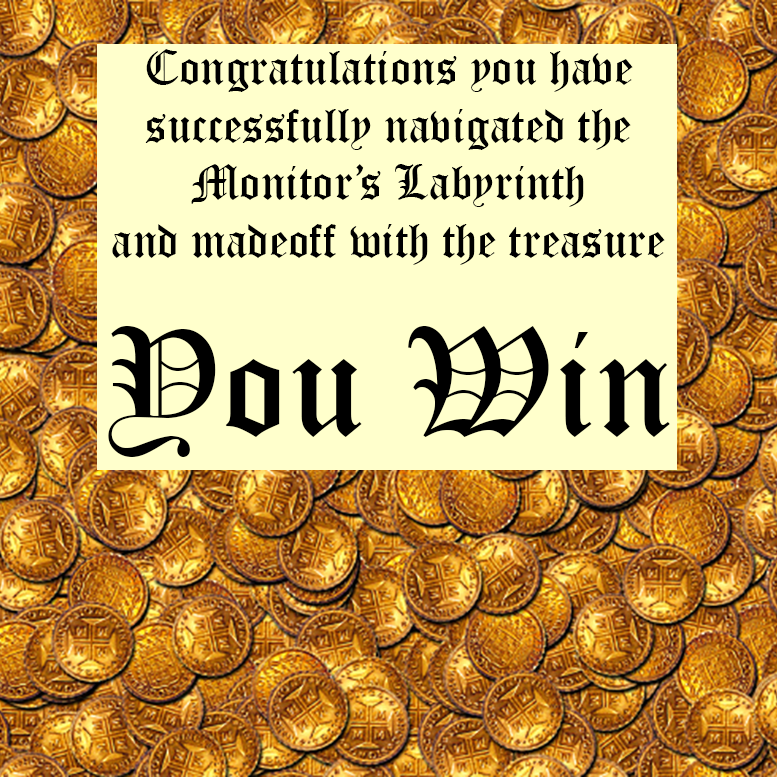
<style>
.page{position:relative;width:777px;height:777px;background:#ffffcc}
.page>*{position:absolute;margin:0}
.t1{font:48px "OldEnglishTextMT";color:#000000}
.t2{font:150px "OldEnglishTextMT";color:#000000}
</style>
<div class="page">
<p class="t1" style="left:112px;top:49px;width:553px;height:216px;text-align:center">Congratulations you have<br>successfully navigated the<br>Monitor’s Labyrinth<br>and madeoff with the treasure</p>
<p class="t2" style="left:108px;top:326px;width:562px;height:131px">You Win</p>
</div>
